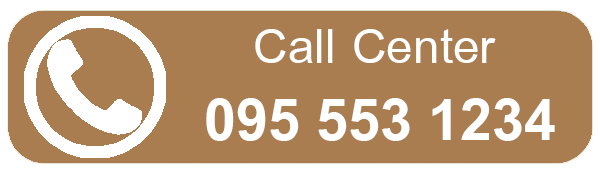
<style>
.page{position:relative;width:600px;height:172px;background:#a97d50}
.page>*{position:absolute;margin:0}
.t1{font:73.3px "BrowalliaNew";color:#ffffff}
.t2{font:88px "BrowalliaNew-Bold";color:#ffffff}
</style>
<div class="page">
<p class="t1" style="left:255px;top:29px;width:241px;height:34px">Call Center</p>
<p class="t2" style="left:206px;top:98px;width:349px;height:43px">095 553 1234</p>
</div>
